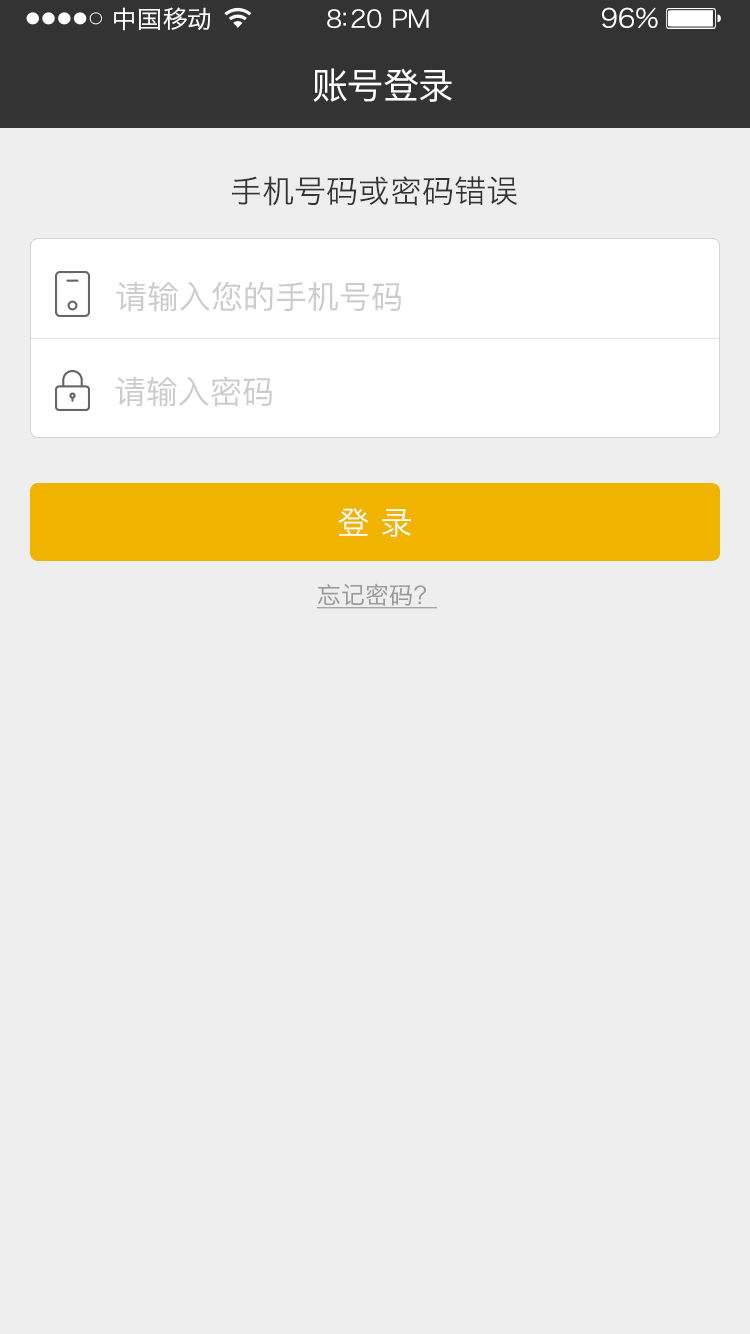
<style>
.page{position:relative;width:750px;height:1334px;background:#eeeeee}
.page>*{position:absolute;margin:0}
.t1{font:24px "HiraginoSansGB-W3";letter-spacing:0.02em;color:#ffffff;scale:1.03 1}
.t2{font:24px "HiraginoSansGB-W3";letter-spacing:-0.02em;color:#ffffff;scale:1.03 1}
.t3{font:26.2px "HiraginoSansGB-W3";letter-spacing:-0.02em;color:#ffffff;scale:1.03 1}
.t4{font:36px "PingFangSC-Regular";letter-spacing:-0.02em;color:#ffffff}
.t5{font:32px "HiraginoSansGB-W3";color:#333333}
.t6{font:32px "PingFangSC-Regular";color:#cccccc}
.t7{font:32px "HiraginoSansGB-W3";color:#ffffff}
.t8{font:24px "HiraginoSansGB-W3";color:#999999;text-decoration:underline}
</style>
<div class="page">
<p class="t1" style="left:114px;top:7px;width:97px;height:24px">中国移动</p>
<p class="t2" style="left:327px;top:9px;width:102px;height:19px">8:20 PM</p>
<p class="t3" style="left:602px;top:7px;width:56px;height:22px">96%</p>
<p class="t4" style="left:313px;top:68px;width:139px;height:34px">账号登录</p>
<p class="t5" style="left:232px;top:176px;width:285px;height:30px">手机号码或密码错误</p>
<p class="t6" style="left:116px;top:281px;width:285px;height:31px">请输入您的手机号码</p>
<p class="t6" style="left:115px;top:376px;width:157px;height:31px">请输入密码</p>
<p class="t7" style="left:338px;top:508px;width:73px;height:29px">登 录</p>
<p class="t8" style="left:317px;top:583px;width:121px;height:26px">忘记密码？</p>
</div>
